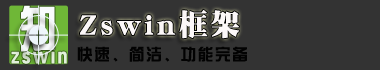
<style>
.page{position:relative;width:380px;height:70px;background:#333333}
.page>*{position:absolute;margin:0}
.t1{font:51.2px "FZZYJW--GB1-0";letter-spacing:0.16em;color:#fafcfd;scale:0.75 1}
.t2{font:29.9px "DFPSongW12";letter-spacing:0.1em;color:#fcf8f8}
.t3{font:23px "FZZYJW--GB1-0";letter-spacing:0.16em;scale:0.75 1}
.t4{font:16.1px "ç»å¸ç»¼èºä½ç®-regular";letter-spacing:0.1em;color:#020202}
</style>
<div class="page">
<p class="t1" style="left:21px;top:5px;width:34px;height:47px">知</p>
<p class="t2" style="left:80px;top:9px;width:159px;height:30px">Zswin框架</p>
<p class="t3" style="left:11px;top:46px;width:56px;height:18px">zswin</p>
<p class="t4" style="left:77px;top:46px;width:170px;height:16px">快速、简洁、功能完备</p>
</div>
